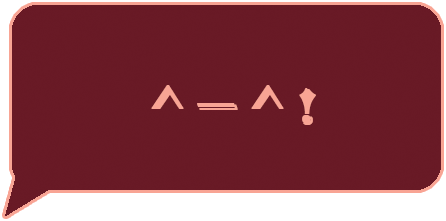
<style>
.page{position:relative;width:446px;height:221px;background:#691a26}
.page>*{position:absolute;margin:0}
.t1{font:55px "Algerian";color:#f8a494;font-weight:bold}
</style>
<div class="page">
<p class="t1" style="left:151px;top:85px;width:165px;height:40px">^ — ^ !</p>
</div>
